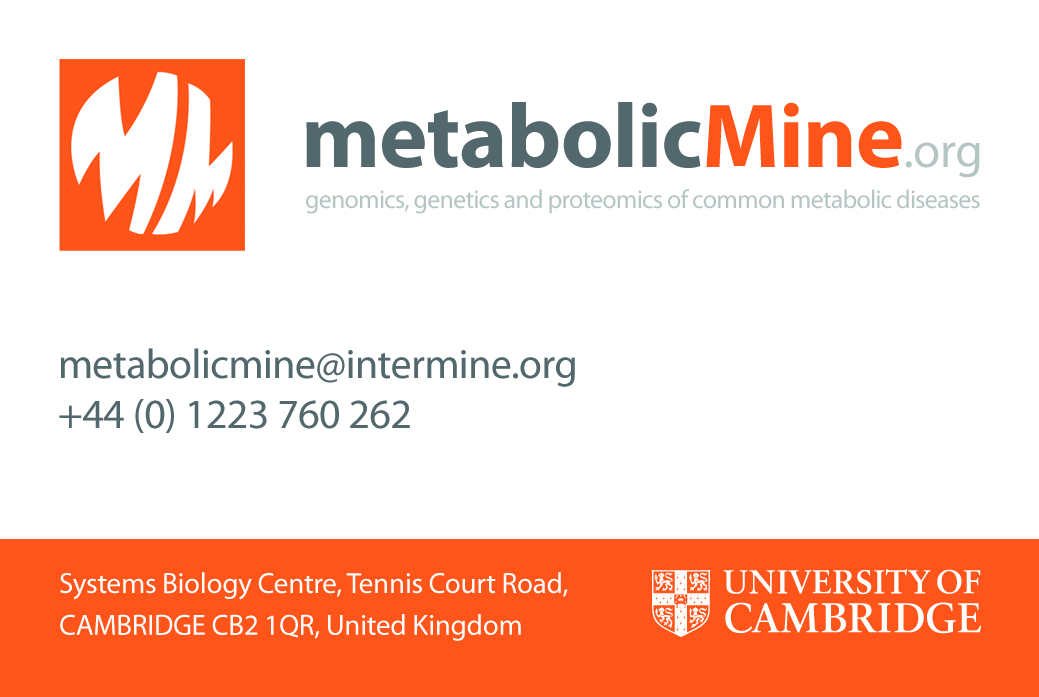
<style>
.page{position:relative;width:1039px;height:697px;background:#ffffff}
.page>*{position:absolute;margin:0}
.t1{font:91.7px "MyriadPro-Bold";letter-spacing:-0.01em;color:#53686d}
.t2{font:91.7px "MyriadPro-Bold";letter-spacing:-0.01em;color:#ff551a}
.t3{font:49.6px "MyriadPro-Regular";letter-spacing:-0.01em;color:#b3c5c3}
.t4{font:26px "MyriadPro-Regular";letter-spacing:-0.03em;color:#b3c5c3}
.t5{font:41.7px "MyriadPro-Regular";letter-spacing:-0.01em;color:#53686d}
.t6{font:29.2px/41.7px "MyriadPro-Regular";letter-spacing:-0.01em;color:#ffffff}
</style>
<div class="page">
<p class="t1" style="left:306px;top:102px;width:674px;height:76px">metabolic<span class="t2">Mine</span><span class="t3">.org</span></p>
<p class="t4" style="left:306px;top:189px;width:674px;height:25px">genomics, genetics and proteomics of common metabolic diseases</p>
<p class="t5" style="left:59px;top:348px;width:516px;height:85px">metabolicmine@intermine.org<br>+44 (0) 1223 760 262</p>
<p class="t6" style="left:60px;top:572px;width:508px;height:69px">Systems Biology Centre, Tennis Court Road,<br>CAMBRIDGE CB2 1QR, United Kingdom</p>
</div>
